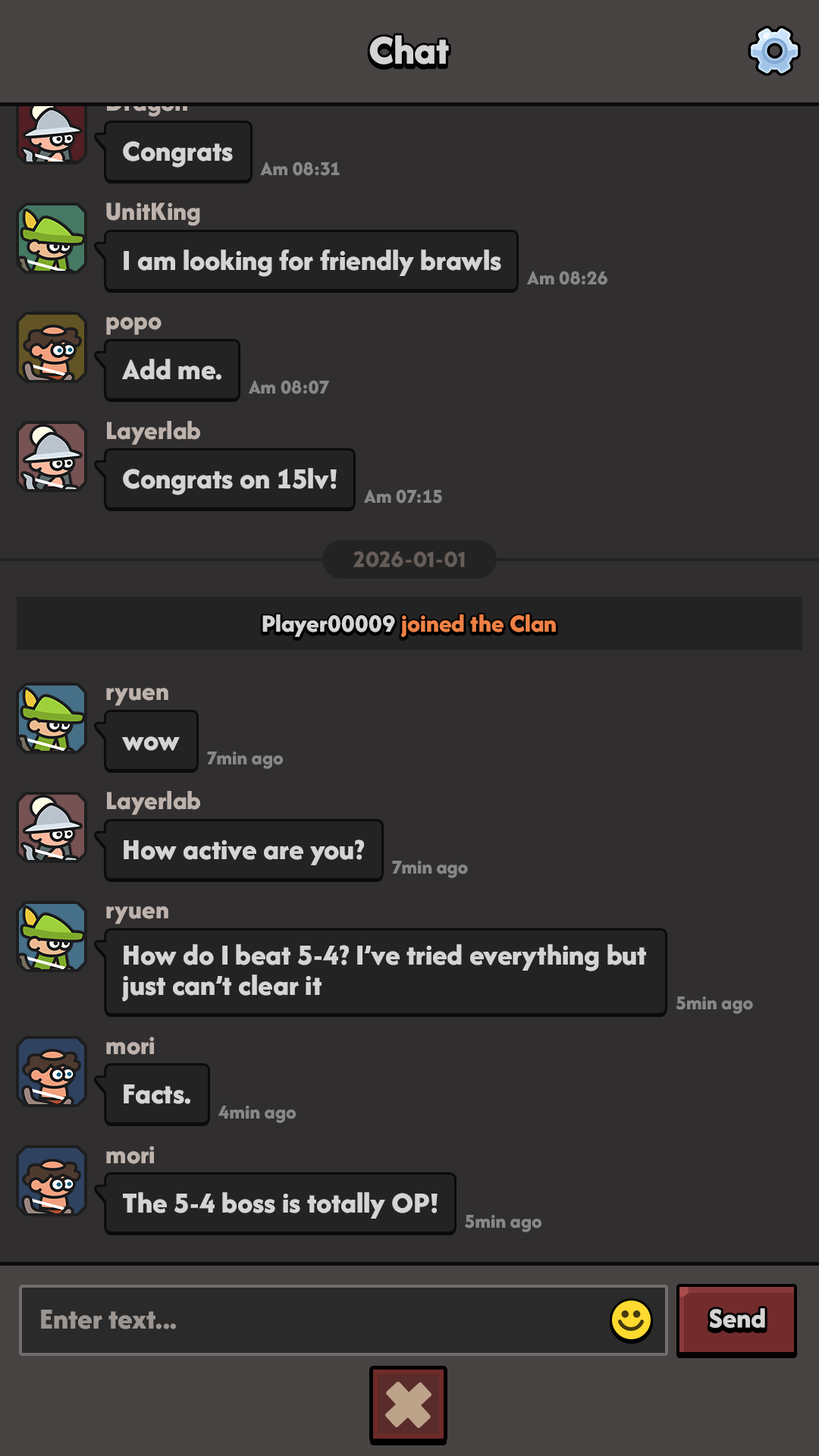
<style>
.page{position:relative;width:819px;height:1456px;background:#302e2f}
.page>*{position:absolute;margin:0}
.t1{font:42.5px "AfacadFlux-ExtraBold";color:#d6d4d3}
.t2{font:27.3px "AfacadFlux-ExtraBold"}
.t3{font:30.3px "AfacadFlux-ExtraBold";color:#d6d4d3}
.t4{font:20.5px "AfacadFlux-ExtraBold";color:#878787}
.t5{font:27.3px "AfacadFlux-ExtraBold";color:#bdb2ac}
.t6{font:22.7px "LTAvocado-Bold";color:#665d58}
.t7{font:25.8px "AfacadFlux-ExtraBold";letter-spacing:0.01em;color:#ee8145}
.t8{font:25.8px "AfacadFlux-ExtraBold";letter-spacing:0.01em;color:#d6d4d3}
.t9{font:30.3px/30.3px "AfacadFlux-ExtraBold";color:#d6d4d3}
.t10{font:30.3px "AfacadFlux-ExtraBold";color:#9b9692}
.t11{font:28.8px "AfacadFlux-ExtraBold";color:#d6d4d3}
</style>
<div class="page">
<p class="t1" style="left:369px;top:35px;width:80px;height:29px">Chat</p>
<p class="t2" style="left:107px;top:93px;width:80px;height:24px">Dragon</p>
<p class="t3" style="left:123px;top:141px;width:110px;height:27px">Congrats</p>
<p class="t4" style="left:260px;top:162px;width:80px;height:14px">Am 08:31</p>
<p class="t5" style="left:106px;top:202px;width:94px;height:24px">UnitKing</p>
<p class="t3" style="left:124px;top:249px;width:377px;height:28px">I am looking for friendly brawls</p>
<p class="t4" style="left:527px;top:271px;width:80px;height:14px">Am 08:26</p>
<p class="t5" style="left:106px;top:317px;width:56px;height:18px">popo</p>
<p class="t3" style="left:122px;top:359px;width:99px;height:21px">Add me.</p>
<p class="t4" style="left:249px;top:380px;width:81px;height:14px">Am 08:07</p>
<p class="t5" style="left:107px;top:421px;width:93px;height:24px">Layerlab</p>
<p class="t3" style="left:123px;top:468px;width:214px;height:27px">Congrats on 15lv!</p>
<p class="t4" style="left:364px;top:489px;width:78px;height:15px">Am 07:15</p>
<p class="t6" style="left:353px;top:551px;width:112px;height:16px">2026-01-01</p>
<p class="t7" style="left:262px;top:614px;width:294px;height:23px"><span class="t8">Player00009 </span>joined the Clan</p>
<p class="t5" style="left:106px;top:688px;width:62px;height:18px">ryuen</p>
<p class="t3" style="left:122px;top:736px;width:58px;height:15px">wow</p>
<p class="t4" style="left:207px;top:751px;width:77px;height:18px">7min ago</p>
<p class="t5" style="left:107px;top:791px;width:93px;height:24px">Layerlab</p>
<p class="t3" style="left:124px;top:839px;width:240px;height:26px">How active are you?</p>
<p class="t4" style="left:392px;top:861px;width:76px;height:17px">7min ago</p>
<p class="t5" style="left:106px;top:906px;width:62px;height:18px">ryuen</p>
<p class="t9" style="left:122px;top:944px;width:524px;height:58px">How do I beat 5-4? I’ve tried everything but<br>just can’t clear it</p>
<p class="t4" style="left:676px;top:996px;width:77px;height:18px">5min ago</p>
<p class="t5" style="left:106px;top:1037px;width:48px;height:18px">mori</p>
<p class="t3" style="left:124px;top:1084px;width:66px;height:20px">Facts.</p>
<p class="t4" style="left:218px;top:1106px;width:79px;height:17px">4min ago</p>
<p class="t5" style="left:106px;top:1146px;width:48px;height:18px">mori</p>
<p class="t3" style="left:123px;top:1192px;width:315px;height:27px">The 5-4 boss is totally OP!</p>
<p class="t4" style="left:465px;top:1215px;width:77px;height:17px">5min ago</p>
<p class="t10" style="left:41px;top:1310px;width:135px;height:19px">Enter text...</p>
<p class="t11" style="left:709px;top:1308px;width:56px;height:20px">Send</p>
</div>
